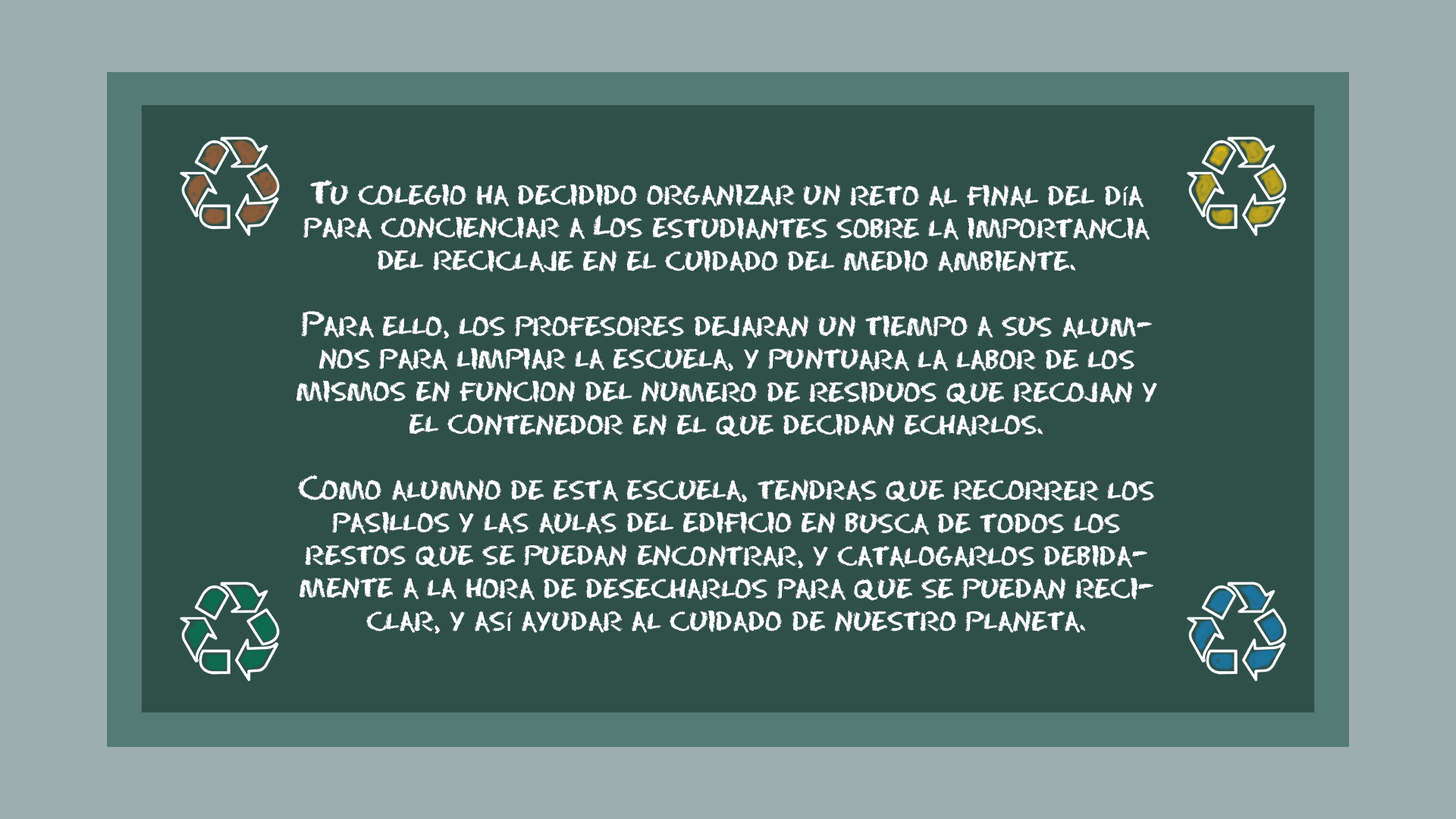
<style>
.page{position:relative;width:1456px;height:819px;background:#2e5049}
.page>*{position:absolute;margin:0}
.t1{font:27.3px "ChalkDustRegularSWFTE";color:#ffffff}
.t2{font:27.3px "MyriadPro-Regular";color:#ffffff}
</style>
<div class="page">
<p class="t1" style="left:297px;top:180px;width:860px;height:454px;text-align:center">Tu colegio ha decidido organizar un reto al final del d<span class="t2">í</span>a para concienciar a Los estudiantes sobre la importancia del reciclaje en el cuidado del medio ambiente.<br><br>Para ello, los profesores dejaran un tiempo a sus alumnos para limpiar la escuela, y puntuara la labor de los mismos en funcion del numero de residuos que recojan y el contenedor en el que decidan echarlos.<br><br>Como alumno de esta escuela, tendras que recorrer los pasillos y las aulas del edificio en busca de todos los restos que se puedan encontrar, y catalogarlos debidamente a la hora de desecharlos para que se puedan reciclar, y as<span class="t2">í</span> ayudar al cuidado de nuestro planeta.</p>
</div>
